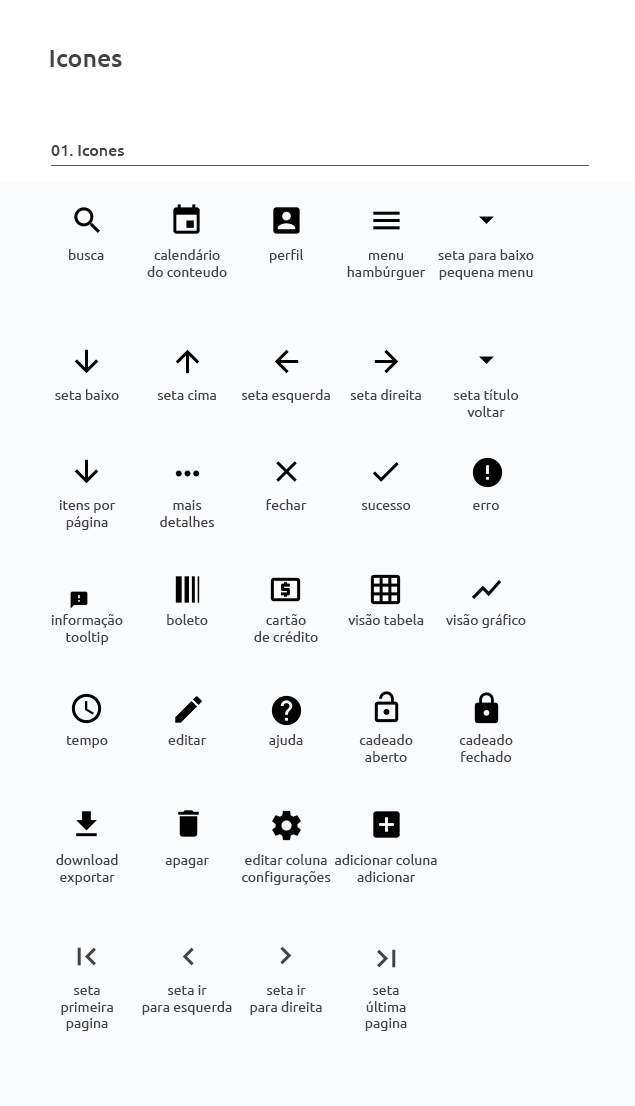
<style>
.page{position:relative;width:635px;height:1106px;background:#fafbfd}
.page>*{position:absolute;margin:0}
.t1{font:25px "Ubuntu-Medium";color:#434343}
.t2{font:16px "Ubuntu-Medium";color:#434343}
.t3{font:14px "Ubuntu-Regular";color:#434343}
</style>
<div class="page">
<p class="t1" style="left:50px;top:50px;width:72px;height:17px">Icones</p>
<p class="t2" style="left:51px;top:145px;width:73px;height:11px">01. Icones</p>
<p class="t3" style="left:69px;top:249px;width:35px;height:11px">busca</p>
<p class="t3" style="left:147px;top:249px;width:80px;height:28px;text-align:center">calendário<br>do conteudo</p>
<p class="t3" style="left:270px;top:249px;width:34px;height:14px">perfil</p>
<p class="t3" style="left:347px;top:253px;width:79px;height:27px;text-align:center">menu<br>hambúrguer</p>
<p class="t3" style="left:438px;top:249px;width:96px;height:31px;text-align:center">seta para baixo<br>pequena menu</p>
<p class="t3" style="left:55px;top:389px;width:64px;height:11px">seta baixo</p>
<p class="t3" style="left:157px;top:390px;width:59px;height:10px">seta cima</p>
<p class="t3" style="left:242px;top:389px;width:88px;height:14px">seta esquerda</p>
<p class="t3" style="left:350px;top:389px;width:71px;height:11px">seta direita</p>
<p class="t3" style="left:454px;top:389px;width:65px;height:28px;text-align:center">seta título<br>voltar</p>
<p class="t3" style="left:59px;top:500px;width:57px;height:30px;text-align:center">itens por<br>página</p>
<p class="t3" style="left:160px;top:500px;width:54px;height:27px;text-align:center">mais<br>detalhes</p>
<p class="t3" style="left:266px;top:499px;width:41px;height:11px">fechar</p>
<p class="t3" style="left:362px;top:503px;width:49px;height:7px">sucesso</p>
<p class="t3" style="left:473px;top:503px;width:26px;height:7px">erro</p>
<p class="t3" style="left:51px;top:614px;width:72px;height:31px;text-align:center">informação<br>tooltip</p>
<p class="t3" style="left:167px;top:614px;width:41px;height:11px">boleto</p>
<p class="t3" style="left:254px;top:614px;width:64px;height:28px;text-align:center">cartão<br>de crédito</p>
<p class="t3" style="left:348px;top:614px;width:76px;height:11px">visão tabela</p>
<p class="t3" style="left:446px;top:614px;width:80px;height:14px">visão gráfico</p>
<p class="t3" style="left:67px;top:736px;width:41px;height:12px">tempo</p>
<p class="t3" style="left:168px;top:734px;width:39px;height:11px">editar</p>
<p class="t3" style="left:269px;top:734px;width:34px;height:14px">ajuda</p>
<p class="t3" style="left:359px;top:734px;width:54px;height:28px;text-align:center">cadeado<br>aberto</p>
<p class="t3" style="left:459px;top:734px;width:54px;height:28px;text-align:center">cadeado<br>fechado</p>
<p class="t3" style="left:56px;top:854px;width:62px;height:31px;text-align:center">download<br>exportar</p>
<p class="t3" style="left:242px;top:854px;width:89px;height:31px;text-align:center">editar coluna<br>configurações</p>
<p class="t3" style="left:335px;top:854px;width:102px;height:28px;text-align:center">adicionar coluna<br>adicionar</p>
<p class="t3" style="left:165px;top:858px;width:44px;height:10px">apagar</p>
<p class="t3" style="left:61px;top:986px;width:52px;height:45px;text-align:center">seta<br>primeira<br>pagina</p>
<p class="t3" style="left:142px;top:985px;width:90px;height:30px;text-align:center">seta ir<br>para esquerda</p>
<p class="t3" style="left:250px;top:985px;width:72px;height:30px;text-align:center">seta ir<br>para direita</p>
<p class="t3" style="left:365px;top:986px;width:42px;height:45px;text-align:center">seta<br>última<br>pagina</p>
</div>
